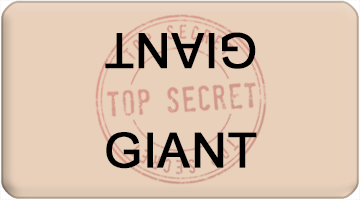
<style>
.page{position:relative;width:360px;height:200px;background:#e8d0bb}
.page>*{position:absolute;margin:0}
.t1{font:48px "ArialMT";color:#000000;font-weight:bold}
</style>
<div class="page">
<p class="t1" style="left:105px;top:32px;width:151px;height:37px;rotate:180deg">GIANT</p>
<p class="t1" style="left:106px;top:132px;width:151px;height:37px">GIANT</p>
</div>
